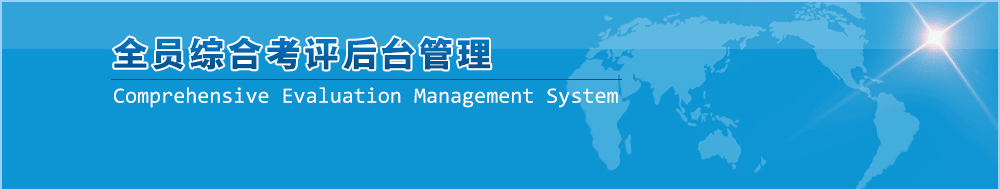
<style>
.page{position:relative;width:1000px;height:189px;background:#0d95d3}
.page>*{position:absolute;margin:0}
.t1{font:35.4px "FZYDCHK--GBK1-0";letter-spacing:0.1em;color:#0264a8}
.t2{font:22.1px "YaHei-Consolas-Hybrid";color:#ffffff}
</style>
<div class="page">
<p class="t1" style="left:113px;top:37px;width:378px;height:33px">全员综合考评后台管理</p>
<p class="t2" style="left:114px;top:87px;width:504px;height:21px">Comprehensive Evaluation Management System</p>
</div>
